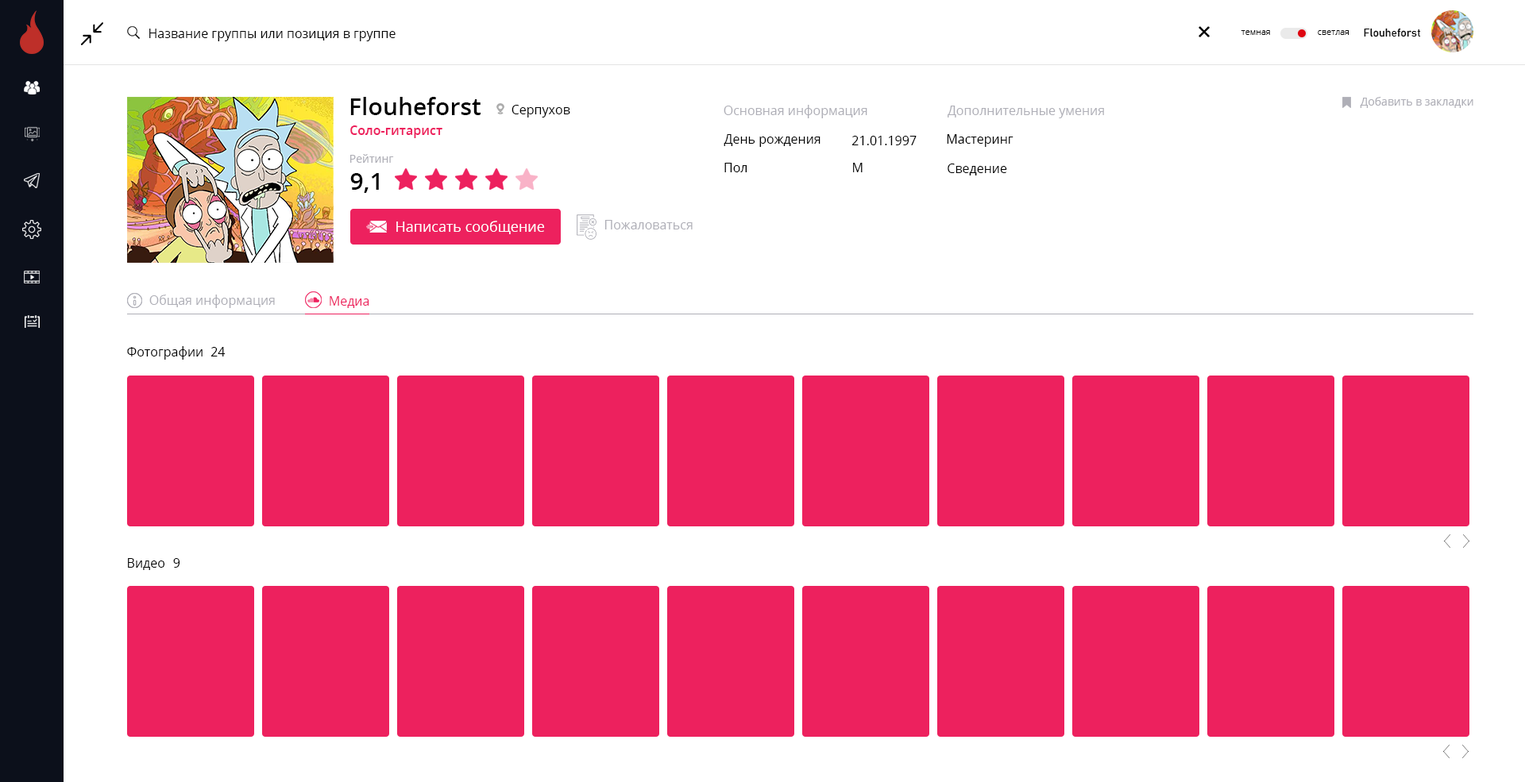
<style>
.page{position:relative;width:1525px;height:782px;background:#ffffff}
.page>*{position:absolute;margin:0}
.t1{font:12.7px "OpenSans";color:#000000}
.t2{font:11.1px "Bahnschrift";color:#000000}
.t3{font:8.7px "OpenSans-Light";color:#000000}
.t4{font:23.8px "OpenSans-Semibold";color:#000000}
.t5{font:11.1px "OpenSans";color:#afafb7}
.t6{font:12.7px "aakar-medium";color:#000000}
.t7{font:12.7px "aakar-medium";color:#afafb7}
.t8{font:12.7px "OpenSans-Semibold";color:#ed215e}
.t9{font:14.3px "aakar-medium";color:#ffffff}
.t10{font:12.7px "aakar-medium";color:#ed215e}
</style>
<div class="page">
<p class="t1" style="left:149px;top:29px;width:246px;height:12px">Название группы или позиция в группе</p>
<p class="t2" style="left:1363px;top:28px;width:58px;height:9px">Flouheforst</p>
<p class="t3" style="left:1240px;top:30px;width:30px;height:5px">темная</p>
<p class="t3" style="left:1317px;top:30px;width:31px;height:5px">светлая</p>
<p class="t4" style="left:350px;top:97px;width:130px;height:18px">Flouheforst</p>
<p class="t5" style="left:1359px;top:97px;width:114px;height:11px">Добавить в закладки</p>
<p class="t6" style="left:511px;top:105px;width:59px;height:13px">Серпухов</p>
<p class="t7" style="left:723px;top:105px;width:144px;height:13px">Основная информация</p>
<p class="t7" style="left:947px;top:106px;width:157px;height:12px">Дополнительные умения</p>
<p class="t8" style="left:350px;top:125px;width:92px;height:13px">Соло-гитарист</p>
<p class="t6" style="left:723px;top:134px;width:97px;height:13px">День рождения</p>
<p class="t6" style="left:851px;top:136px;width:65px;height:9px">21.01.1997</p>
<p class="t6" style="left:947px;top:134px;width:66px;height:13px">Мастеринг</p>
<p class="t5" style="left:350px;top:154px;width:44px;height:9px">Рейтинг</p>
<p class="t4" style="left:350px;top:173px;width:29px;height:20px">9,1</p>
<p class="t6" style="left:724px;top:163px;width:23px;height:9px">Пол</p>
<p class="t6" style="left:853px;top:163px;width:9px;height:9px">М</p>
<p class="t6" style="left:947px;top:164px;width:60px;height:11px">Сведение</p>
<p class="t9" style="left:396px;top:221px;width:149px;height:13px">Написать сообщение</p>
<p class="t7" style="left:604px;top:220px;width:88px;height:9px">Пожаловаться</p>
<p class="t7" style="left:149px;top:295px;width:126px;height:13px">Общая информация</p>
<p class="t10" style="left:330px;top:296px;width:39px;height:12px">Медиа</p>
<p class="t6" style="left:127px;top:346px;width:75px;height:14px">Фотографии</p>
<p class="t6" style="left:210px;top:347px;width:16px;height:10px">24</p>
<p class="t6" style="left:128px;top:558px;width:37px;height:12px">Видео</p>
<p class="t6" style="left:173px;top:558px;width:7px;height:10px">9</p>
</div>
